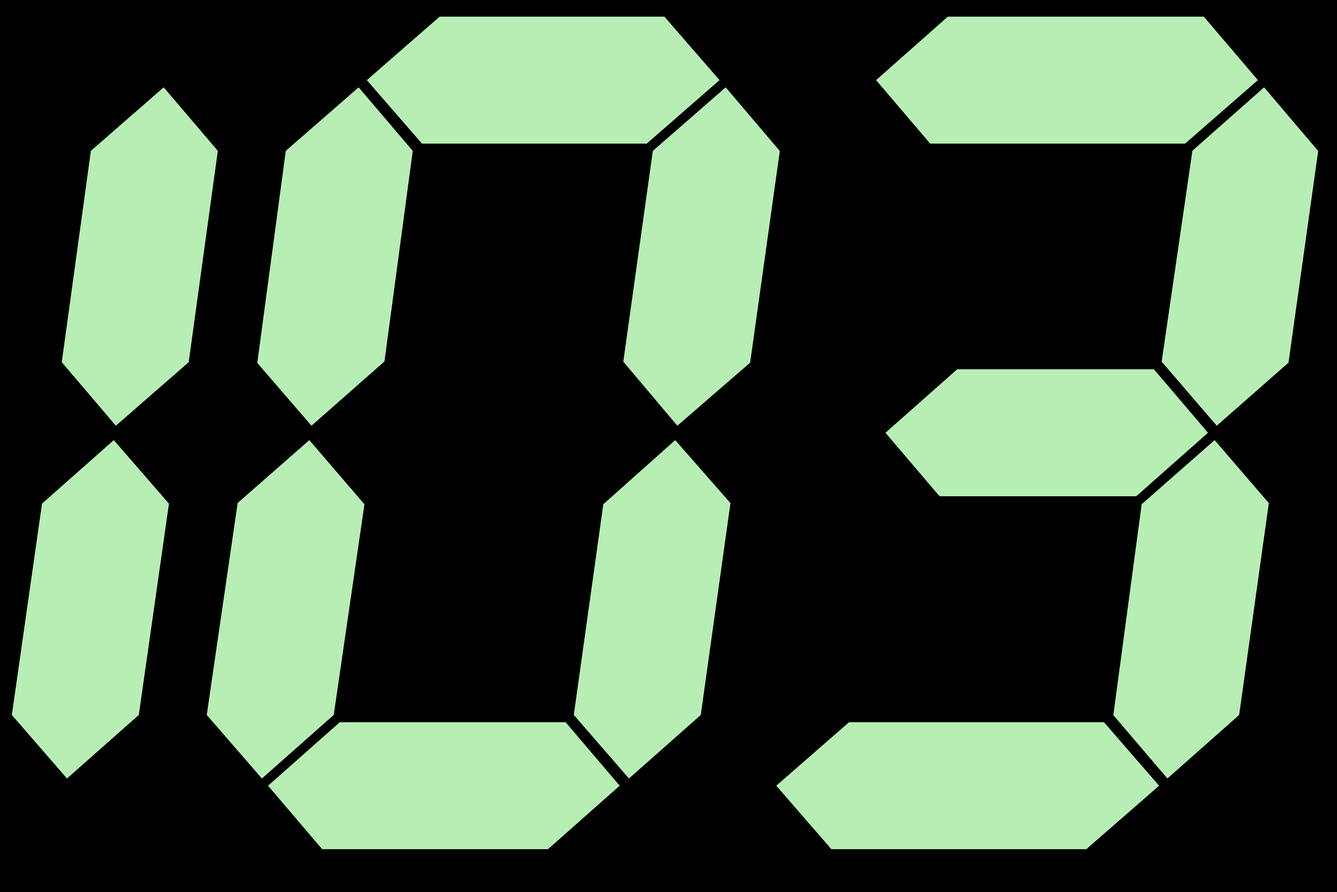
<style>
.page{position:relative;width:1337px;height:892px;background:#000000}
.page>*{position:absolute;margin:0}
.t1{font:1040.2px "MouseLEDU";color:#b6eeb3}
</style>
<div class="page">
<p class="t1" style="left:12px;top:17px;width:1307px;height:832px">103</p>
</div>
